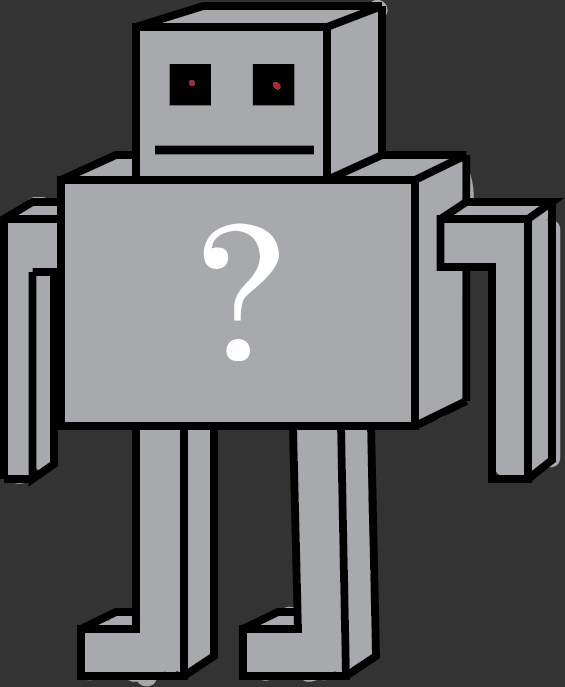
<style>
.page{position:relative;width:565px;height:687px;background:#a7a9ac}
.page>*{position:absolute;margin:0}
.t1{font:200px "FZSHJW--GB1-0";color:#ffffff}
</style>
<div class="page">
<p class="t1" style="left:203px;top:223px;width:76px;height:138px">?</p>
</div>
